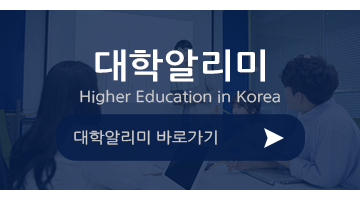
<style>
.page{position:relative;width:360px;height:200px}
.page>*{position:absolute;margin:0}
.t1{font:33.8px "NanumGothicBold";color:#ffffff;scale:1.11 1}
.t2{font:15px "NanumGothic";color:#cccccc;scale:1.11 1}
</style>
<div class="page">
<p class="t1" style="left:95px;top:49px;width:170px;height:33px">대학알리미</p>
<p class="t2" style="left:80px;top:89px;width:200px;height:16px">Higher Education in Korea</p>
<p class="t2" style="left:74px;top:130px;width:143px;height:15px">대학알리미 바로가기</p>
</div>
